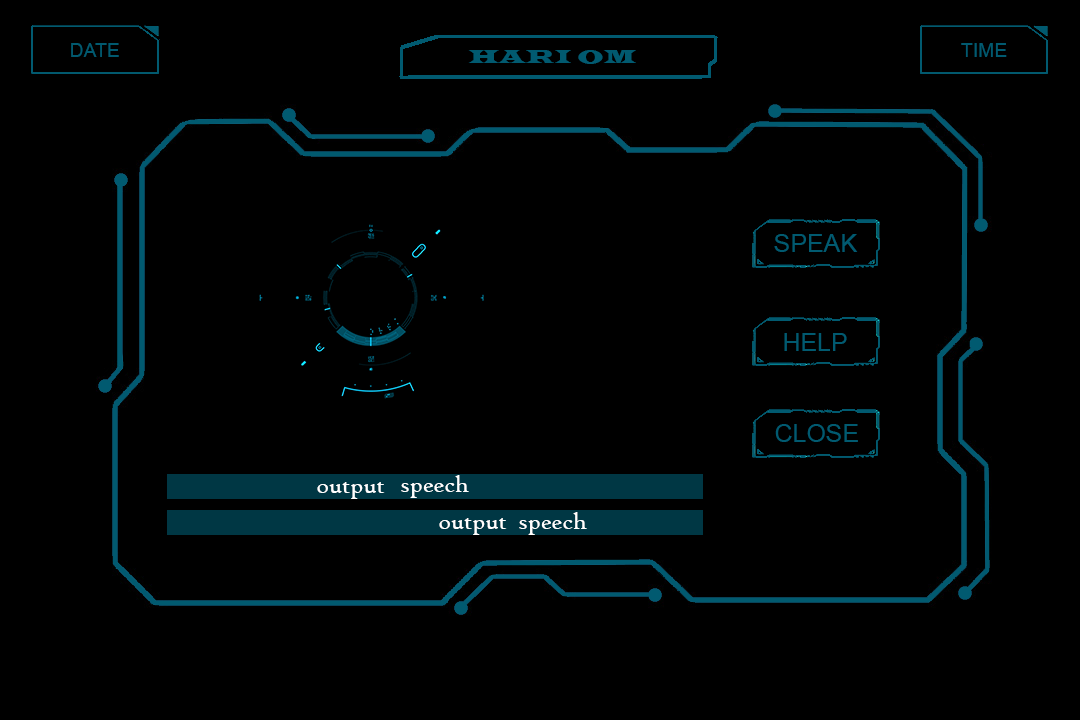
<style>
.page{position:relative;width:1080px;height:720px;background:#000000}
.page>*{position:absolute;margin:0}
.t1{font:19.4px "ArialMT";color:#015a70}
.t2{font:19.4px "LatinWide";color:#015a70}
.t3{font:25px "ArialMT";color:#015a70}
.t4{font:25px "HighTowerText-Reg";color:#ffffff}
</style>
<div class="page">
<p class="t1" style="left:71px;top:43px;width:48px;height:14px">DATE</p>
<p class="t2" style="left:468px;top:50px;width:168px;height:14px">HARI OM</p>
<p class="t1" style="left:961px;top:43px;width:46px;height:14px">TIME</p>
<p class="t3" style="left:774px;top:234px;width:84px;height:18px">SPEAK</p>
<p class="t3" style="left:784px;top:333px;width:63px;height:18px">HELP</p>
<p class="t3" style="left:775px;top:424px;width:83px;height:18px">CLOSE</p>
<p class="t4" style="left:317px;top:482px;width:68px;height:17px">output</p>
<p class="t4" style="left:401px;top:475px;width:68px;height:23px">speech</p>
<p class="t4" style="left:439px;top:518px;width:68px;height:17px">output</p>
<p class="t4" style="left:519px;top:512px;width:68px;height:23px">speech</p>
</div>
